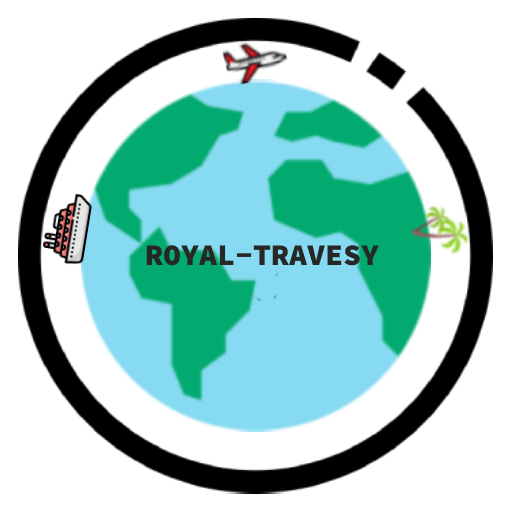
<style>
.page{position:relative;width:512px;height:512px;background:#ffffff}
.page>*{position:absolute;margin:0}
.t1{font:30px "SourceCodePro-Black";color:#272727}
</style>
<div class="page">
<p class="t1" style="left:146px;top:245px;width:233px;height:21px">ROYAL-TRAVESY</p>
</div>
